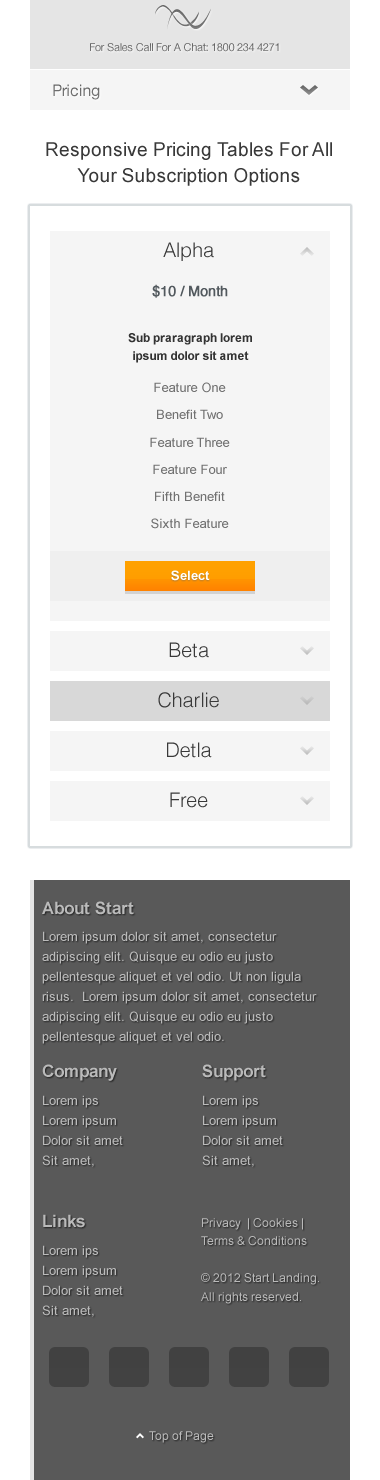
<style>
.page{position:relative;width:380px;height:1480px;background:#ffffff}
.page>*{position:absolute;margin:0}
.t1{font:11px "HelveticaNeue-Roman";letter-spacing:-0.02em;color:#6f6f6f}
.t2{font:16px "HelveticaNeue-Roman";letter-spacing:-0.02em;color:#707070}
.t3{font:19px/26.2px "ArialMT";color:#393939}
.t4{font:20px "Helvetica-Light";color:#393939}
.t5{font:14px "Helvetica";color:#52595e;font-weight:bold}
.t6{font:12px/18.5px "Arial-BoldMT";color:#333333}
.t7{font:13px/27.2px "ArialMT";color:#717171}
.t8{font:13px "Arial-BoldMT";color:#fefefe}
.t9{font:17px "Arial-BoldMT";color:#bbbbbb}
.t10{font:13px/20px "ArialMT";color:#bbbbbb}
.t11{font:17px "Arial-BoldMT";color:#bababa}
.t12{font:13px "ArialMT";color:#bbbbbb}
.t13{font:12px/18.5px "ArialMT";color:#bababa}
.t14{font:12px "ArialMT";color:#bbbbbb}
</style>
<div class="page">
<p class="t1" style="left:90px;top:43px;width:189px;height:9px">For Sales Call For A Chat: 1800 234 4271</p>
<p class="t2" style="left:53px;top:84px;width:47px;height:16px">Pricing</p>
<p class="t3" style="left:46px;top:142px;width:286px;height:44px;text-align:center">Responsive Pricing Tables For All Your Subscription Options</p>
<p class="t4" style="left:163px;top:242px;width:51px;height:19px">Alpha</p>
<p class="t5" style="left:152px;top:284px;width:76px;height:14px">$10 / Month</p>
<p class="t6" style="left:128px;top:333px;width:124px;height:30px;text-align:center">Sub praragraph lorem ipsum dolor sit amet</p>
<p class="t7" style="left:150px;top:382px;width:80px;height:147px;text-align:center">Feature One<br>Benefit Two<br>Feature Three<br>Feature Four<br>Fifth Benefit<br>Sixth Feature</p>
<p class="t8" style="left:171px;top:570px;width:39px;height:11px">Select</p>
<p class="t4" style="left:169px;top:642px;width:40px;height:16px">Beta</p>
<p class="t4" style="left:158px;top:692px;width:61px;height:16px">Charlie</p>
<p class="t4" style="left:167px;top:742px;width:45px;height:16px">Detla</p>
<p class="t4" style="left:170px;top:792px;width:38px;height:16px">Free</p>
<p class="t9" style="left:42px;top:901px;width:92px;height:14px">About Start</p>
<p class="t10" style="left:42px;top:931px;width:275px;height:113px">Lorem ipsum dolor sit amet, consectetur adipiscing elit. Quisque eu odio eu justo pellentesque aliquet et vel odio. Ut non ligula risus.  Lorem ipsum dolor sit amet, consectetur adipiscing elit. Quisque eu odio eu justo pellentesque aliquet et vel odio.</p>
<p class="t11" style="left:42px;top:1064px;width:75px;height:17px">Company</p>
<p class="t11" style="left:202px;top:1064px;width:64px;height:17px">Support</p>
<p class="t12" style="left:43px;top:1095px;width:55px;height:13px">Lorem ips</p>
<p class="t12" style="left:203px;top:1095px;width:55px;height:13px">Lorem ips</p>
<p class="t12" style="left:43px;top:1115px;width:73px;height:13px">Lorem ipsum</p>
<p class="t12" style="left:203px;top:1115px;width:73px;height:13px">Lorem ipsum</p>
<p class="t12" style="left:43px;top:1135px;width:80px;height:10px">Dolor sit amet</p>
<p class="t12" style="left:203px;top:1135px;width:80px;height:10px">Dolor sit amet</p>
<p class="t12" style="left:42px;top:1155px;width:52px;height:12px">Sit amet,</p>
<p class="t12" style="left:202px;top:1155px;width:52px;height:12px">Sit amet,</p>
<p class="t11" style="left:43px;top:1214px;width:42px;height:14px">Links</p>
<p class="t13" style="left:201px;top:1218px;width:118px;height:86px">Privacy  | Cookies | Terms &amp; Conditions <br><br>© 2012 Start Landing. All rights reserved.</p>
<p class="t12" style="left:43px;top:1245px;width:55px;height:13px">Lorem ips</p>
<p class="t12" style="left:43px;top:1265px;width:73px;height:13px">Lorem ipsum</p>
<p class="t12" style="left:43px;top:1285px;width:80px;height:10px">Dolor sit amet</p>
<p class="t12" style="left:42px;top:1305px;width:52px;height:12px">Sit amet,</p>
<p class="t14" style="left:149px;top:1431px;width:65px;height:12px">Top of Page</p>
</div>
